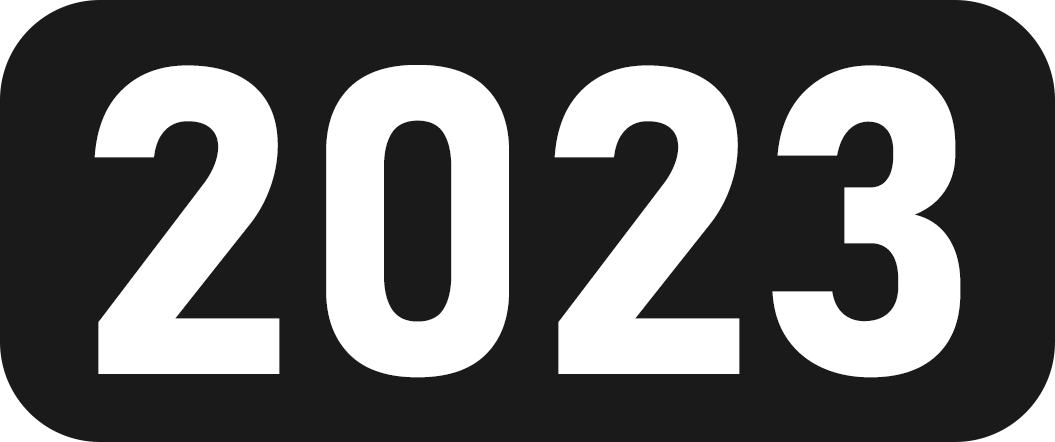
<style>
.page{position:relative;width:1055px;height:442px;background:#1a1a1a}
.page>*{position:absolute;margin:0}
.t1{font:429.9px "Bahnschrift-Bold";color:#ffffff}
</style>
<div class="page">
<p class="t1" style="left:94px;top:65px;width:867px;height:313px">2023</p>
</div>
